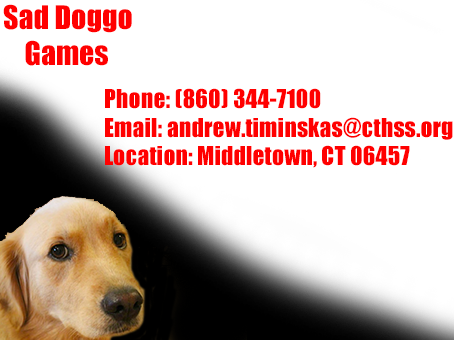
<style>
.page{position:relative;width:454px;height:340px;background:#ffffff}
.page>*{position:absolute;margin:0}
.t1{font:30px "Impact";color:#ff0000}
.t2{font:24px "Impact";color:#ff0000}
</style>
<div class="page">
<p class="t1" style="left:3px;top:4px;width:129px;height:62px">Sad Doggo<br>    Games</p>
<p class="t2" style="left:105px;top:88px;width:348px;height:80px">Phone: (860) 344-7100<br>Email: andrew.timinskas@cthss.org<br>Location: Middletown, CT 06457</p>
</div>
